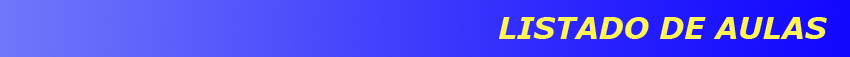
<style>
.page{position:relative;width:850px;height:57px}
.page>*{position:absolute;margin:0}
.t1{font:30px "Verdana-BoldItalic";color:#fff557}
</style>
<div class="page">
<p class="t1" style="left:499px;top:17px;width:328px;height:22px">LISTADO DE AULAS</p>
</div>
